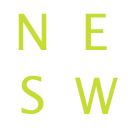
<style>
.page{position:relative;width:128px;height:128px;background:#ffffff}
.page>*{position:absolute;margin:0}
.t1{font:50px "LucidaGrande";color:#c6dc35}
</style>
<div class="page">
<p class="t1" style="left:18px;top:13px;width:29px;height:37px">N</p>
<p class="t1" style="left:85px;top:13px;width:22px;height:37px">E</p>
<p class="t1" style="left:21px;top:75px;width:23px;height:39px">S</p>
<p class="t1" style="left:75px;top:77px;width:43px;height:37px">W</p>
</div>
